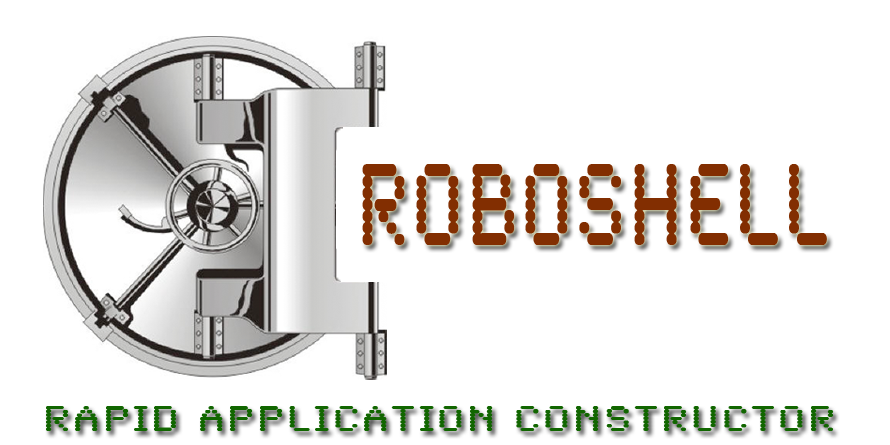
<style>
.page{position:relative;width:890px;height:445px;background:#ffffff}
.page>*{position:absolute;margin:0}
.t1{font:121px "SynchroLET";letter-spacing:0.05em;color:#822e01;scale:0.69 1}
.t2{font:37px "SynchroLET";letter-spacing:0.075em;color:#116600;scale:1.19 1}
</style>
<div class="page">
<p class="t1" style="left:362px;top:164px;width:465px;height:81px">roboshell</p>
<p class="t2" style="left:46px;top:406px;width:788px;height:25px">RAPID APPLICATION constructOR</p>
</div>
